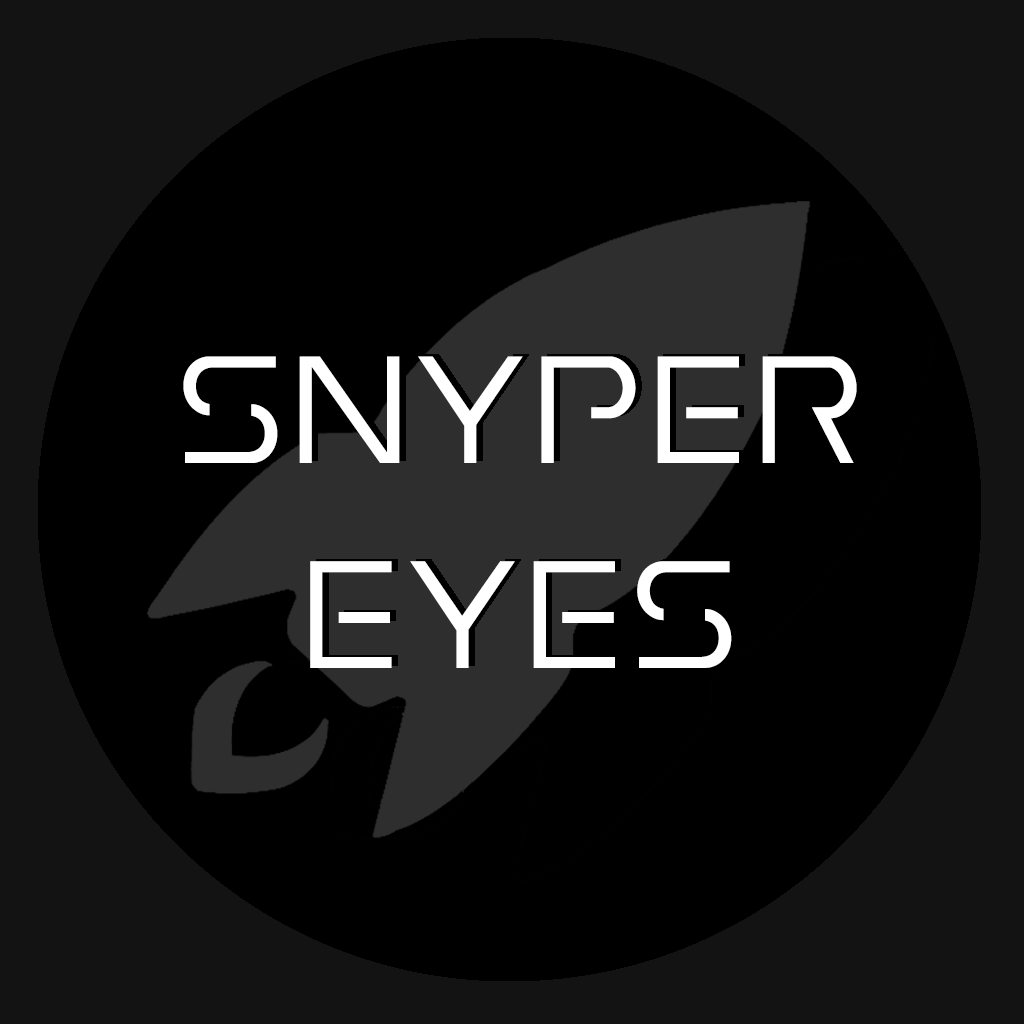
<style>
.page{position:relative;width:1024px;height:1024px;background:#000000}
.page>*{position:absolute;margin:0}
.t1{font:170.7px "EarthOrbiter";color:#ffffff}
</style>
<div class="page">
<p class="t1" style="left:183px;top:356px;width:674px;height:312px;text-align:center">Snyper<br>Eyes</p>
</div>
